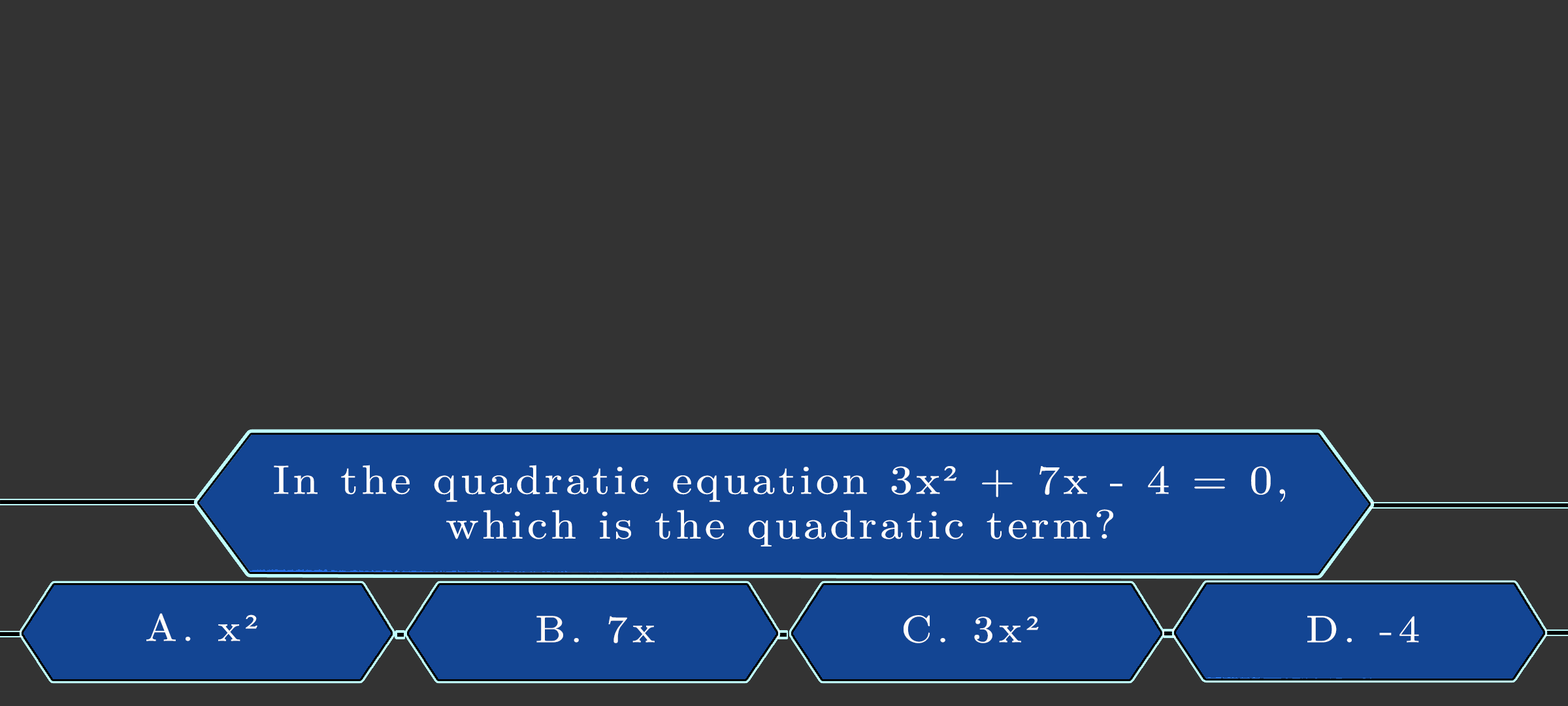
<style>
.page{position:relative;width:1568px;height:706px;background:#333333}
.page>*{position:absolute;margin:0}
.t1{font:40.9px/44.8px "LatinModernMath-Regular";letter-spacing:0.075em;color:#ffffff;scale:1.12 1}
.t2{font:40.9px/44.8px "LatinModernMath-Regular";letter-spacing:0.075em;color:#ffffff;text-transform:uppercase;scale:1.12 1}
.t3{font:40.9px/44.8px "TimesNewRomanPSMT";letter-spacing:0.075em;color:#ffffff;scale:1.12 1}
.t4{font:38.1px "LatinModernMath-Regular";letter-spacing:0.115em;color:#fdfdfd;scale:1.12 1}
.t5{font:38.1px "TimesNewRomanPSMT";letter-spacing:0.115em;color:#fdfdfd;scale:1.12 1}
.t6{font:38.1px "LatinModernMath-Regular";letter-spacing:0.115em;color:#fcf9f9;scale:1.12 1}
.t7{font:38.1px "LatinModernMath-Regular";letter-spacing:0.115em;color:#fdfcfc;scale:1.12 1}
.t8{font:38.1px "TimesNewRomanPSMT";letter-spacing:0.115em;color:#fdfcfc;scale:1.12 1}
.t9{font:38.1px "LatinModernMath-Regular";letter-spacing:0.115em;color:#fffdfd;text-transform:uppercase;scale:1.12 1}
</style>
<div class="page">
<p class="t1" style="left:274px;top:465px;width:1012px;height:81px;text-align:center"><span class="t2">I</span>n the quadratic equation 3x<span class="t3">²</span> + 7x - 4 = 0,<br>which is the quadratic term?</p>
<p class="t4" style="left:146px;top:613px;width:111px;height:28px">A. x<span class="t5">²</span></p>
<p class="t6" style="left:536px;top:615px;width:119px;height:28px">B. 7x</p>
<p class="t7" style="left:904px;top:615px;width:135px;height:28px">C. 3x<span class="t8">²</span></p>
<p class="t9" style="left:1307px;top:615px;width:112px;height:27px">D. -4</p>
</div>
